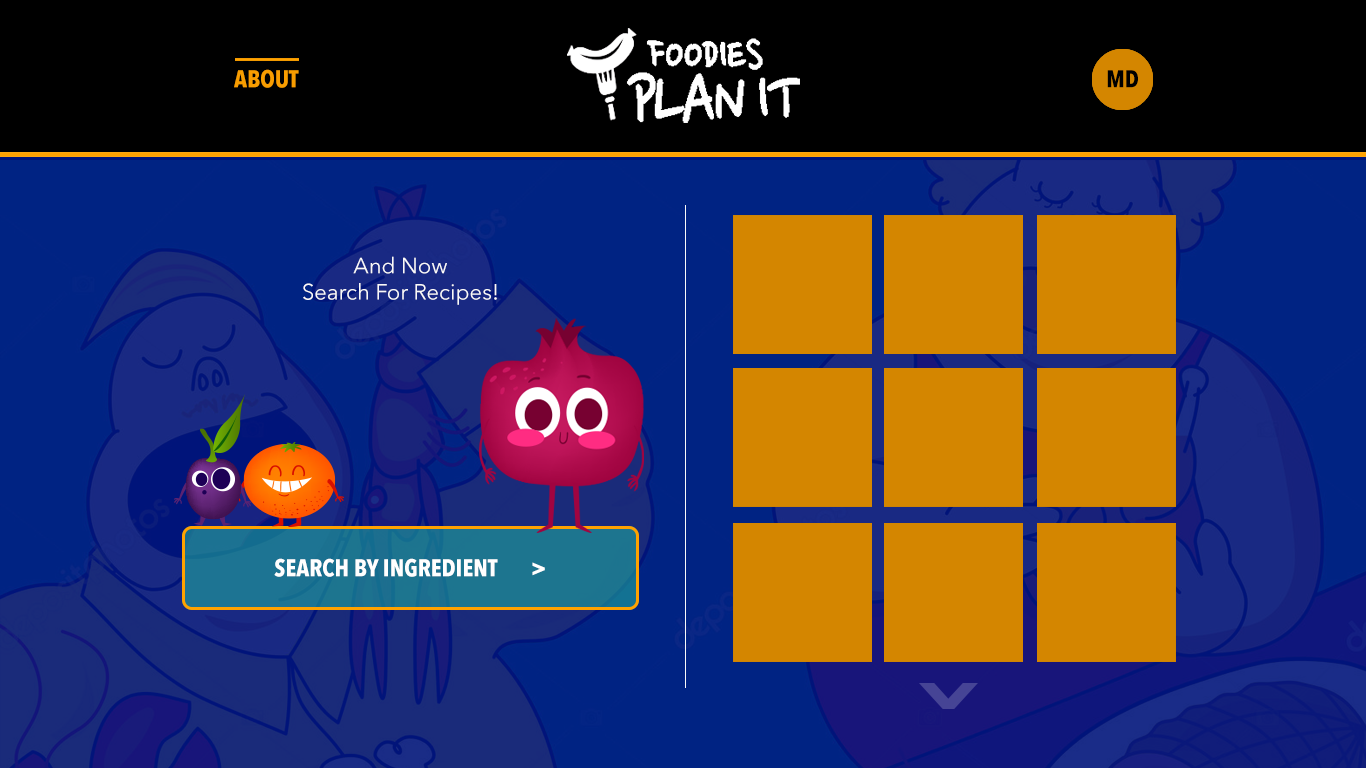
<style>
.page{position:relative;width:1366px;height:768px;background:#002383}
.page>*{position:absolute;margin:0}
.t1{font:24px "AvenirNextCondensed-Bold";color:#f89e00;text-transform:uppercase}
.t2{font:24px "AvenirNextCondensed-Bold";color:#000000;text-transform:uppercase}
.t3{font:22px "AvenirNext-Regular";color:#f9f9f9}
.t4{font:24px "AvenirNextCondensed-Bold";color:#ffffff;text-transform:uppercase}
</style>
<div class="page">
<p class="t1" style="left:234px;top:69px;width:65px;height:19px">ABOUT</p>
<p class="t2" style="left:1107px;top:70px;width:31px;height:18px">MD</p>
<p class="t3" style="left:303px;top:256px;width:194px;height:49px;text-align:center">And Now <br>Search For Recipes!</p>
<p class="t4" style="left:274px;top:558px;width:271px;height:19px">SEARCH BY INGREDIENT       &gt;</p>
</div>
